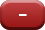
<style>
.page{position:relative;width:45px;height:30px}
.page>*{position:absolute;margin:0}
.t1{font:30px "MyriadPro-Regular";color:#ffffff}
</style>
<div class="page">
<p class="t1" style="left:19px;top:14px;width:8px;height:2px">-</p>
</div>
